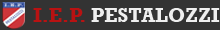
<style>
.page{position:relative;width:220px;height:30px;background:#333333}
.page>*{position:absolute;margin:0}
.t1{font:20px "Rockwell-Bold";color:#efefef}
.t2{font:18px "MyanmarText-Bold";color:#b91212}
.t3{font:20px "Rockwell-Bold";color:#b91212}
</style>
<div class="page">
<p class="t1" style="left:33px;top:8px;width:187px;height:14px"><span class="t2">  </span><span class="t3">I.E.P. </span>PESTALOZZI</p>
</div>
